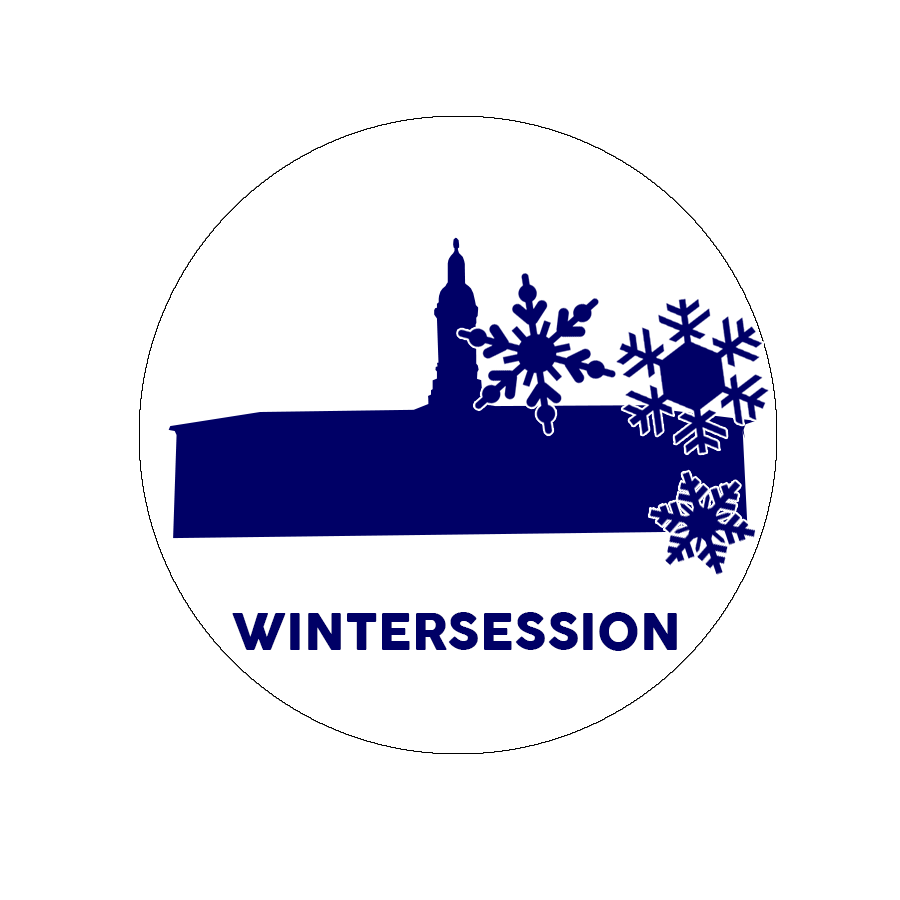
<style>
.page{position:relative;width:900px;height:900px;background:#ffffff}
.page>*{position:absolute;margin:0}
.t1{font:50px "COCOGOOSE";color:#000066}
</style>
<div class="page">
<p class="t1" style="left:232px;top:612px;width:445px;height:39px">WINTERSESSION</p>
</div>
